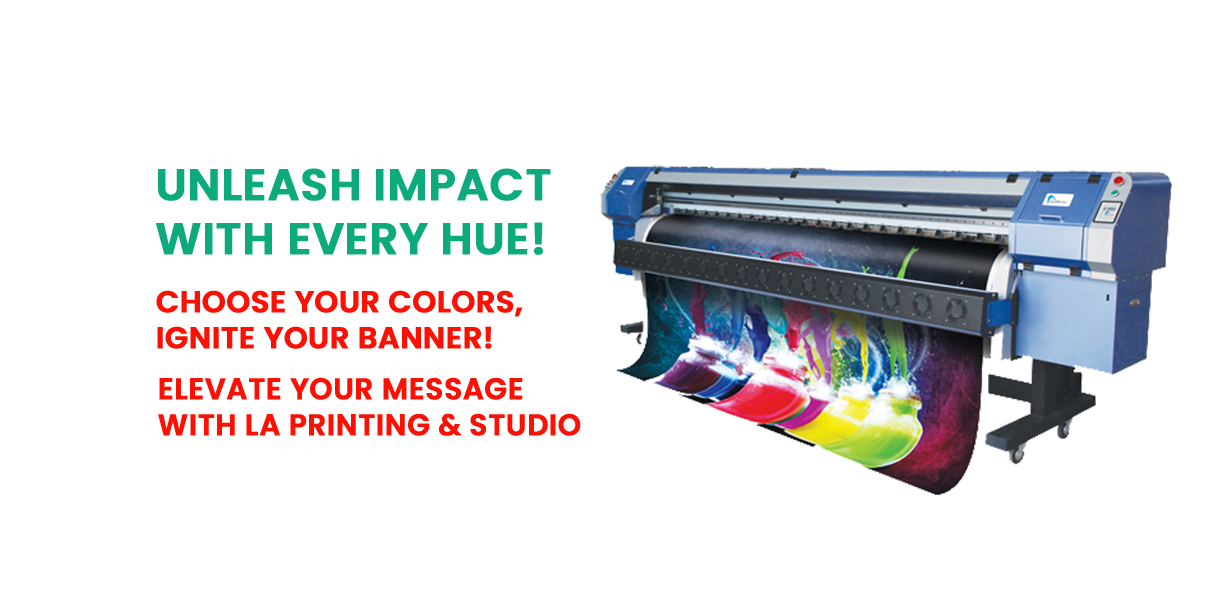
<style>
.page{position:relative;width:1230px;height:609px;background:#ffffff}
.page>*{position:absolute;margin:0}
.t1{font:44.4px "Poppins-SemiBold";color:#0caa7d;text-transform:uppercase;font-weight:bold}
.t2{font:30px "Poppins-SemiBold";color:#fb1004;text-transform:uppercase;font-weight:bold}
.t3{font:29.9px "Poppins-SemiBold";color:#fb1004;text-transform:uppercase;font-weight:bold}
</style>
<div class="page">
<p class="t1" style="left:156px;top:168px;width:395px;height:87px">Unleash Impact <br>with Every Hue!</p>
<p class="t2" style="left:156px;top:290px;width:367px;height:59px">Choose Your Colors, <br>Ignite Your Banner!</p>
<p class="t3" style="left:158px;top:377px;width:423px;height:59px">Elevate Your Message <br>with La Printing &amp; Studio</p>
</div>
